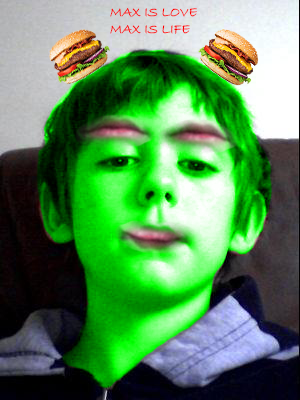
<style>
.page{position:relative;width:300px;height:400px}
.page>*{position:absolute;margin:0}
.t1{font:14px "BradleyHandITC";color:#fe0000}
</style>
<div class="page">
<p class="t1" style="left:110px;top:8px;width:87px;height:26px">MAX IS LOVE<br>MAX IS LIFE</p>
</div>
